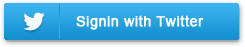
<style>
.page{position:relative;width:245px;height:47px}
.page>*{position:absolute;margin:0}
.t1{font:14px "ArialMT";letter-spacing:0.025em;color:#ffffff;font-weight:bold}
</style>
<div class="page">
<p class="t1" style="left:76px;top:15px;width:128px;height:15px">Signin with Twitter</p>
</div>
